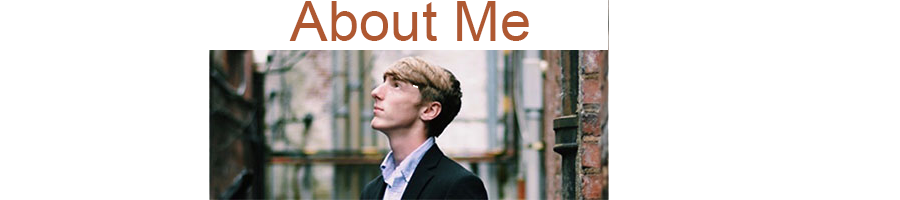
<style>
.page{position:relative;width:900px;height:200px;background:#ffffff}
.page>*{position:absolute;margin:0}
.t1{font:56.5px "ArialMT";color:#af5831}
</style>
<div class="page">
<p class="t1" style="left:289px;top:1px;width:240px;height:40px">About Me</p>
</div>
